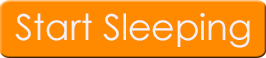
<style>
.page{position:relative;width:266px;height:58px;background:#ff8a00}
.page>*{position:absolute;margin:0}
.t1{font:36px "CenturyGothic";color:#f2f2f2}
</style>
<div class="page">
<p class="t1" style="left:15px;top:13px;width:235px;height:35px">Start Sleeping</p>
</div>
